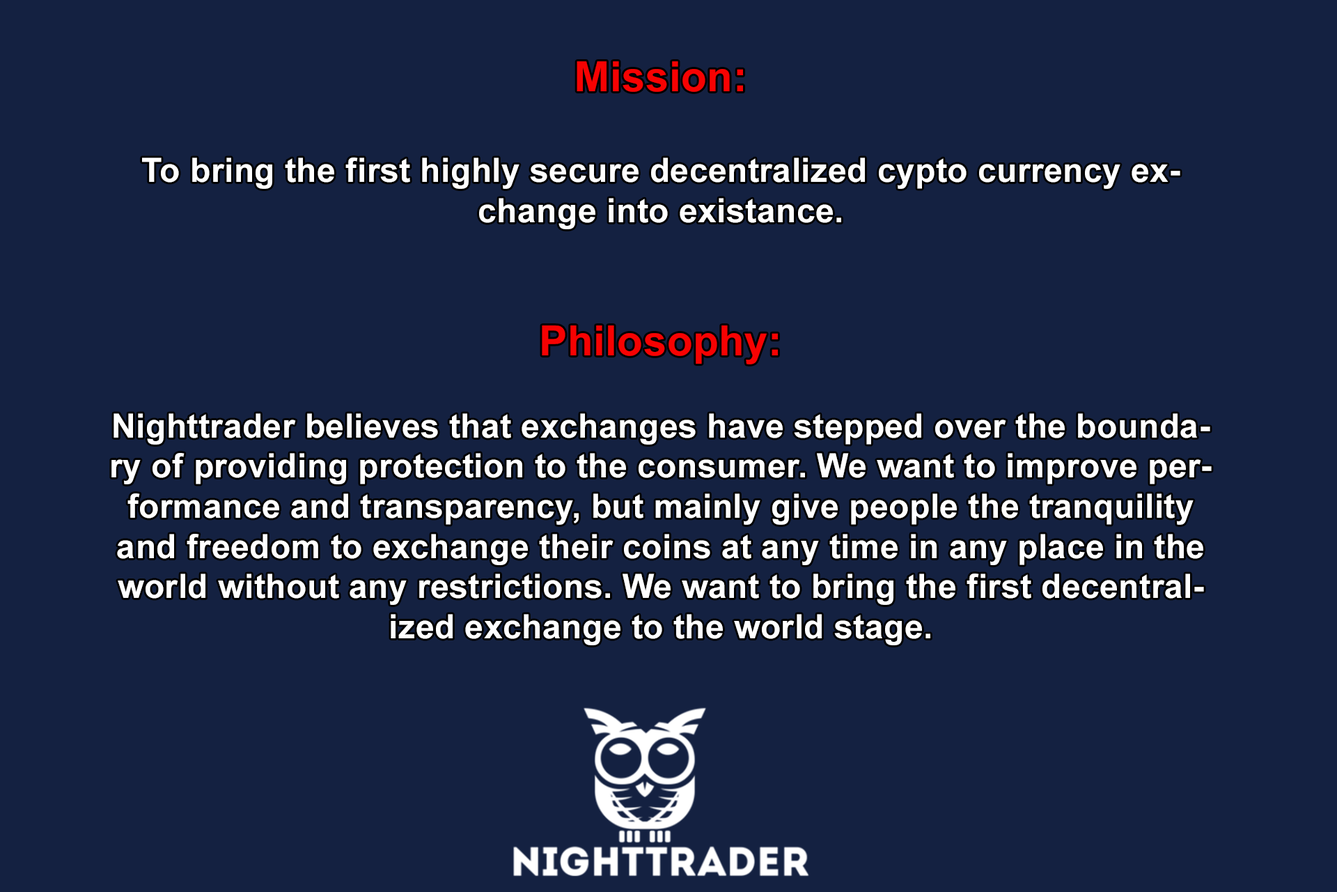
<style>
.page{position:relative;width:1337px;height:892px;background:#142141}
.page>*{position:absolute;margin:0}
.t1{font:33.4px "Arial-BoldMT";letter-spacing:0.01em;color:#ffffff}
.t2{font:41.8px "Arial-BoldMT";letter-spacing:0.01em;color:#f70202}
</style>
<div class="page">
<p class="t1" style="left:111px;top:61px;width:1101px;height:584px;text-align:center"><span class="t2">Mission:<br><br></span>To bring the first highly secure decentralized cypto currency exchange into existance.<br><br><br><span class="t2">Philosophy:<br><br></span>Nighttrader believes that exchanges have stepped over the boundary of providing protection to the consumer. We want to improve performance and transparency, but mainly give people the tranquility and freedom to exchange their coins at any time in any place in the world without any restrictions. We want to bring the first decentralized exchange to the world stage.</p>
</div>
